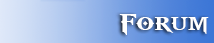
<style>
.page{position:relative;width:214px;height:43px}
.page>*{position:absolute;margin:0}
.t1{font:26px "GodOfWar";color:#ffffff}
</style>
<div class="page">
<p class="t1" style="left:119px;top:14px;width:90px;height:21px">Forum</p>
</div>
